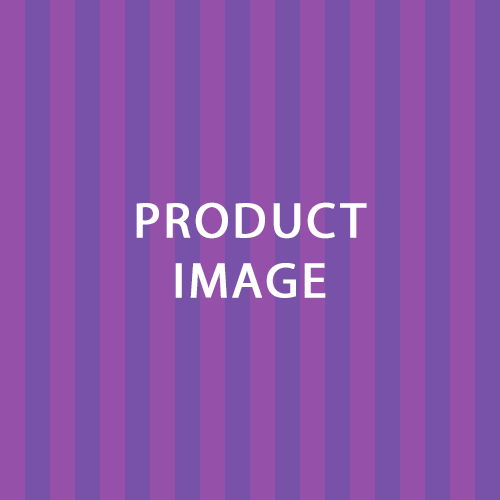
<style>
.page{position:relative;width:500px;height:500px;background:#7851a9}
.page>*{position:absolute;margin:0}
.t1{font:50px "MyriadPro-Regular";letter-spacing:0.05em;color:#ffffff;font-weight:bold}
</style>
<div class="page">
<p class="t1" style="left:136px;top:202px;width:231px;height:96px;text-align:center">PRODUCT<br>IMAGE</p>
</div>
